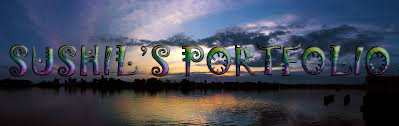
<style>
.page{position:relative;width:399px;height:126px}
.page>*{position:absolute;margin:0}
.t1{font:36px "Jokerman-Regular"}
</style>
<div class="page">
<p class="t1" style="left:9px;top:41px;width:381px;height:36px">SUSHIL’S PORTFOLIO</p>
</div>
